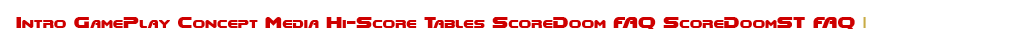
<style>
.page{position:relative;width:1024px;height:50px;background:#ffffff}
.page>*{position:absolute;margin:0}
.t1{font:14px "DooM";color:#ce0000}
.t2{font:14px "DooM";color:#c8ab45}
</style>
<div class="page">
<p class="t1" style="left:16px;top:17px;width:850px;height:12px">Intro GamePlay Concept Media Hi-Score Tables ScoreDoom FAQ ScoreDoomST FAQ <span class="t2">|</span></p>
</div>
